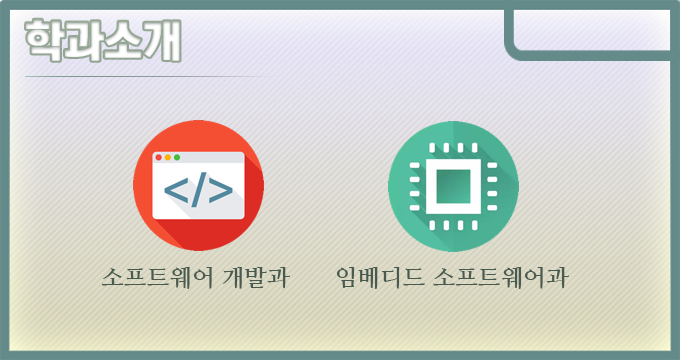
<style>
.page{position:relative;width:680px;height:360px}
.page>*{position:absolute;margin:0}
.t1{font:44px "KoreanTITGD5-R";letter-spacing:-0.01em;color:#ffffff}
.t2{font:24px "NanumMyeongjoBold";letter-spacing:-0.01em;color:#495a4e}
</style>
<div class="page">
<p class="t1" style="left:26px;top:19px;width:154px;height:42px">학과소개</p>
<p class="t2" style="left:101px;top:267px;width:189px;height:22px">소프트웨어 개발과</p>
<p class="t2" style="left:336px;top:267px;width:233px;height:22px">임베디드 소프트웨어과</p>
</div>
